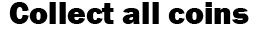
<style>
.page{position:relative;width:271px;height:29px;background:#ffffff}
.page>*{position:absolute;margin:0}
.t1{font:32px "FranklinGothic-Heavy";color:#000000}
</style>
<div class="page">
<p class="t1" style="left:9px;top:2px;width:240px;height:22px">Collect all coins</p>
</div>
